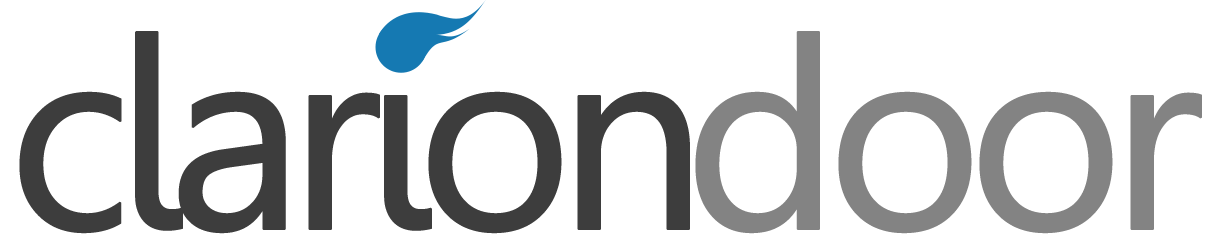
<style>
.page{position:relative;width:1214px;height:245px;background:#ffffff}
.page>*{position:absolute;margin:0}
.t1{font:266.1px "Gisha";letter-spacing:-0.085em;color:#3d3d3d;font-weight:bold}
.t2{font:266.1px "Gisha";letter-spacing:-0.08em;color:#838383;font-weight:bold}
</style>
<div class="page">
<p class="t1" style="left:19px;top:31px;width:671px;height:203px">clarion</p>
<p class="t2" style="left:695px;top:31px;width:507px;height:203px">door</p>
</div>
